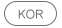
<style>
.page{position:relative;width:62px;height:28px;background:#ffffff}
.page>*{position:absolute;margin:0}
.t1{font:12px "ArialMT";color:#707070}
</style>
<div class="page">
<p class="t1" style="left:18px;top:9px;width:25px;height:10px">KOR</p>
</div>
